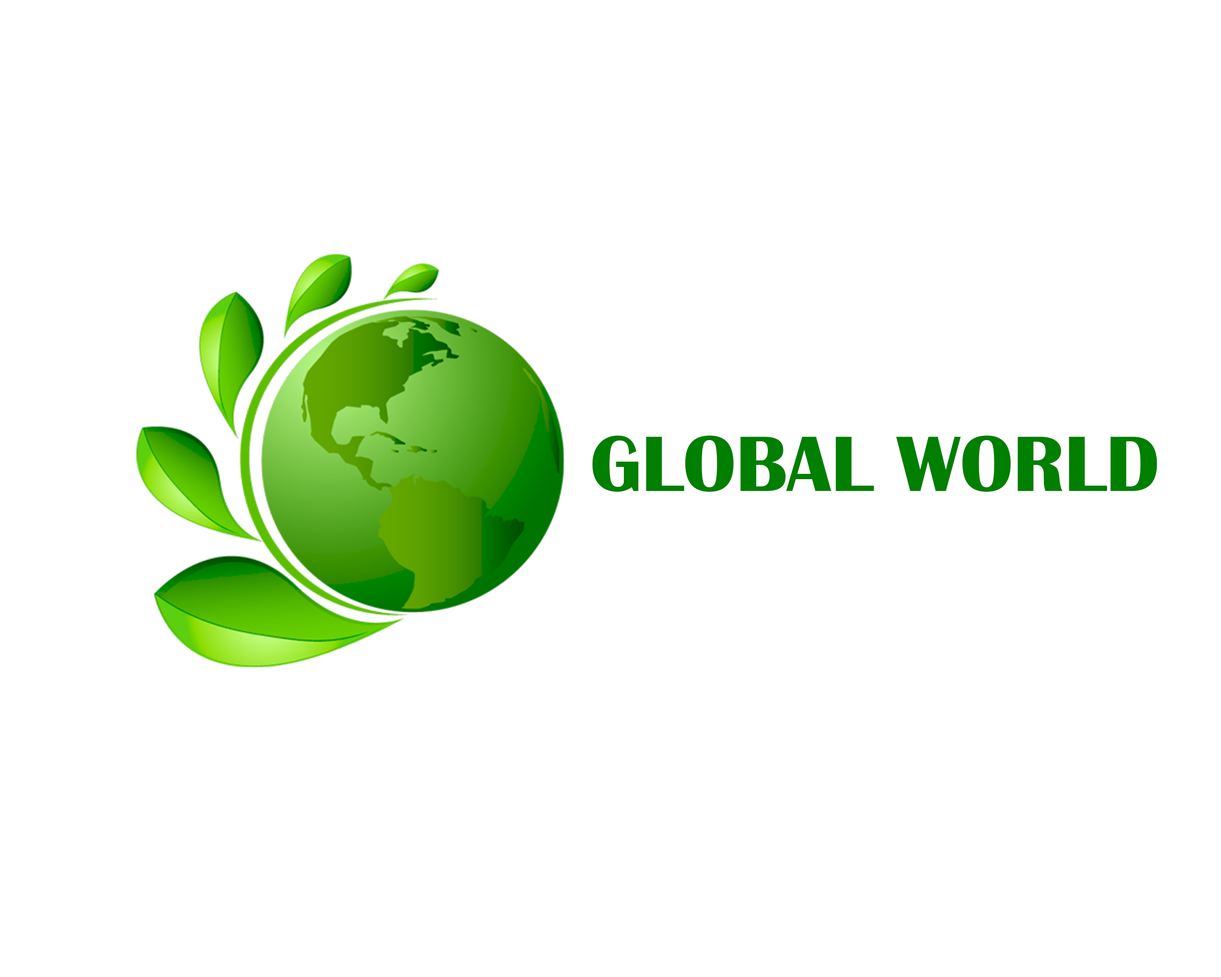
<style>
.page{position:relative;width:1221px;height:977px;background:#ffffff}
.page>*{position:absolute;margin:0}
.t1{font:81.4px "BritannicBold";color:#007f00}
</style>
<div class="page">
<p class="t1" style="left:592px;top:435px;width:565px;height:57px">GLOBAL WORLD</p>
</div>
